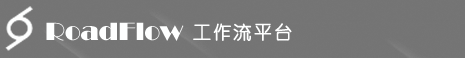
<style>
.page{position:relative;width:465px;height:58px;background:#747474}
.page>*{position:absolute;margin:0}
.t1{font:26px "Broadway";color:#feffff}
.t2{font:18px "YouYuan";letter-spacing:0.1em;color:#feffff;font-weight:bold}
</style>
<div class="page">
<p class="t1" style="left:46px;top:22px;width:138px;height:19px">RoadFlow</p>
<p class="t2" style="left:193px;top:23px;width:99px;height:18px">工作流平台</p>
</div>
